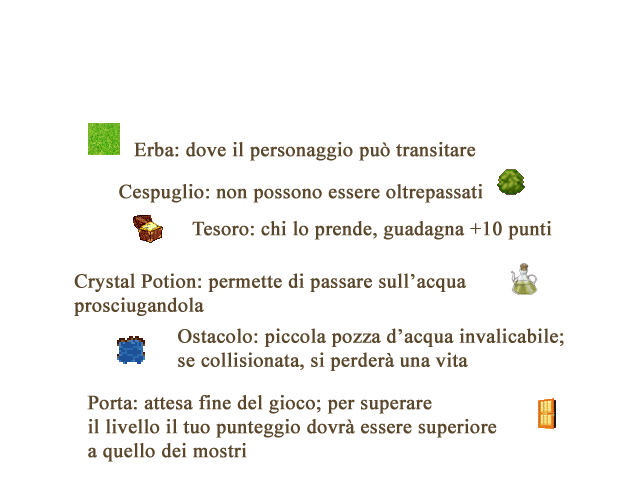
<style>
.page{position:relative;width:640px;height:480px;background:#ffffff}
.page>*{position:absolute;margin:0}
.t1{font:20px "TimesNewRomanPSMT";color:#5a472c;font-weight:bold}
</style>
<div class="page">
<p class="t1" style="left:134px;top:142px;width:342px;height:19px">Erba: dove il personaggio può transitare</p>
<p class="t1" style="left:119px;top:184px;width:364px;height:19px">Cespuglio: non possono essere oltrepassati</p>
<p class="t1" style="left:192px;top:221px;width:360px;height:19px">Tesoro: chi lo prende, guadagna +10 punti</p>
<p class="t1" style="left:74px;top:273px;width:392px;height:43px">Crystal Potion: permette di passare sull’acqua<br>prosciugandola</p>
<p class="t1" style="left:178px;top:328px;width:386px;height:43px">Ostacolo: piccola pozza d’acqua invalicabile;<br>se collisionata, si perderà una vita</p>
<p class="t1" style="left:87px;top:395px;width:410px;height:67px">Porta: attesa fine del gioco; per superare<br>il livello il tuo punteggio dovrà essere superiore<br>a quello dei mostri</p>
</div>
